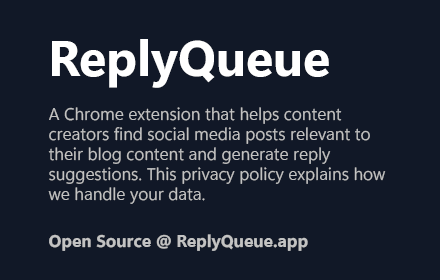
<style>
.page{position:relative;width:440px;height:280px;background:#111827}
.page>*{position:absolute;margin:0}
.t1{font:50px "SegoeUIVariable-BoldText";color:#ffffff}
.t2{font:16.7px "SegoeUIVariable-SemilightSmall";color:#c3c3c3}
.t3{font:16.7px "SegoeUIVariable-BoldSmall";color:#c3c3c3}
</style>
<div class="page">
<p class="t1" style="left:52px;top:39px;width:277px;height:49px">ReplyQueue</p>
<p class="t2" style="left:48px;top:107px;width:338px;height:97px">A Chrome extension that helps content creators find social media posts relevant to their blog content and generate reply suggestions. This privacy policy explains how we handle your data.</p>
<p class="t3" style="left:49px;top:234px;width:259px;height:17px">Open Source @ ReplyQueue.app</p>
</div>
